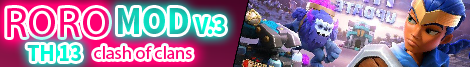
<style>
.page{position:relative;width:470px;height:67px}
.page>*{position:absolute;margin:0}
.t1{font:41.7px "MyriadPro-Regular";color:#ff0072;scale:1.05 1}
.t2{font:38.5px "SourceSansPro-Bold";text-transform:uppercase;scale:0.92 1}
.t3{font:25.7px "SourceSansPro-Bold";color:#06edcb;text-transform:uppercase;scale:0.92 1}
.t4{font:23.8px "SourceSansPro-Bold";color:#03f9d5;text-transform:uppercase;scale:0.92 1}
.t5{font:17.1px "MyriadPro-Regular";color:#ff0072;scale:1.05 1}
</style>
<div class="page">
<p class="t1" style="left:7px;top:8px;width:102px;height:29px">RORO</p>
<p class="t2" style="left:118px;top:8px;width:70px;height:26px">mod</p>
<p class="t3" style="left:195px;top:17px;width:30px;height:17px">v.3</p>
<p class="t4" style="left:27px;top:45px;width:54px;height:16px">TH 13</p>
<p class="t5" style="left:94px;top:46px;width:98px;height:13px">clash of clans</p>
</div>
